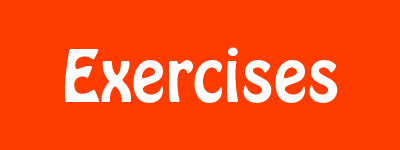
<style>
.page{position:relative;width:400px;height:150px;background:#ff3c00}
.page>*{position:absolute;margin:0}
.t1{font:63.7px "HoboStd";color:#ffffff}
</style>
<div class="page">
<p class="t1" style="left:65px;top:47px;width:273px;height:56px">Exercises</p>
</div>
